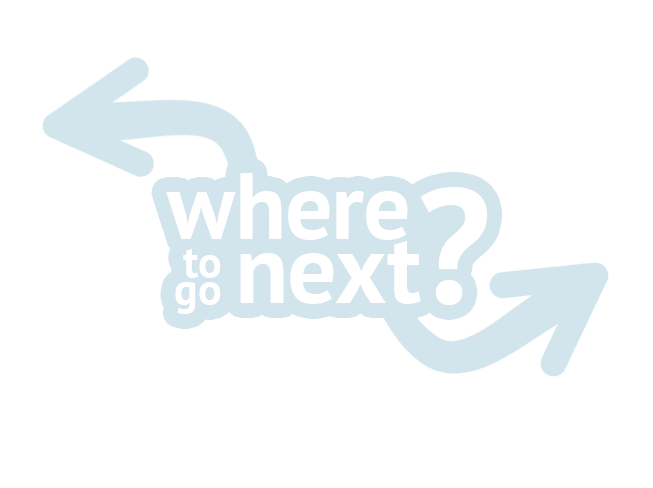
<style>
.page{position:relative;width:653px;height:488px;background:#ffffff}
.page>*{position:absolute;margin:0}
.t1{font:94.5px "PTSans-Bold";color:#ffffff}
.t2{font:163.3px "PTSans-Bold";color:#ffffff}
.t3{font:97.9px "PTSans-Bold";color:#ffffff}
.t4{font:44.1px/26.4px "PTSans-Bold";color:#ffffff}
</style>
<div class="page">
<p class="t1" style="left:166px;top:173px;width:242px;height:67px">where</p>
<p class="t2" style="left:420px;top:187px;width:68px;height:118px">?</p>
<p class="t3" style="left:240px;top:241px;width:181px;height:63px">next</p>
<p class="t4" style="left:175px;top:249px;width:46px;height:65px;text-align:right">to<br>go</p>
</div>
